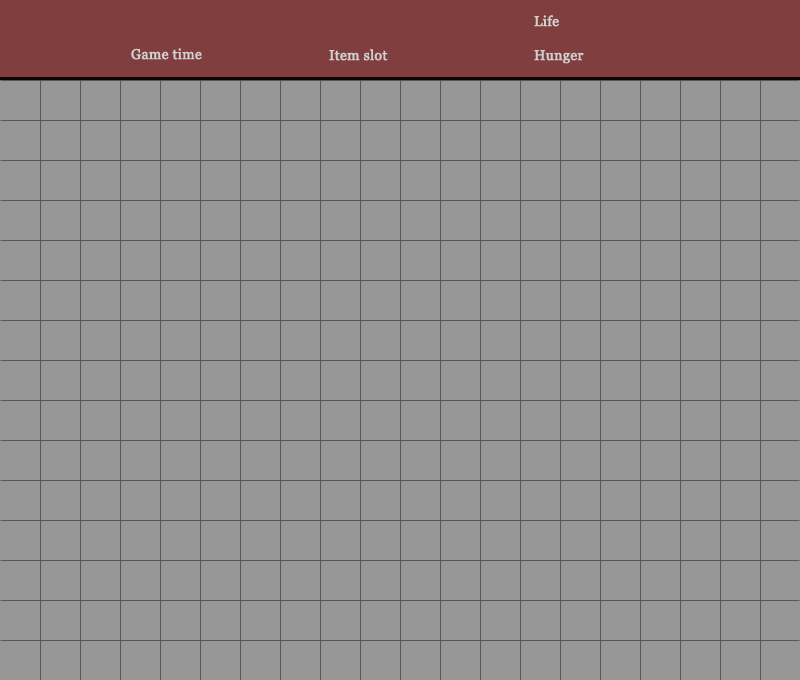
<style>
.page{position:relative;width:800px;height:680px;background:#979797}
.page>*{position:absolute;margin:0}
.t1{font:14px "Georgia";color:#d0d0d0;font-weight:bold}
</style>
<div class="page">
<p class="t1" style="left:534px;top:15px;width:25px;height:12px">Life</p>
<p class="t1" style="left:131px;top:48px;width:71px;height:12px">Game time</p>
<p class="t1" style="left:329px;top:49px;width:59px;height:12px">Item slot</p>
<p class="t1" style="left:534px;top:50px;width:50px;height:14px">Hunger</p>
</div>
